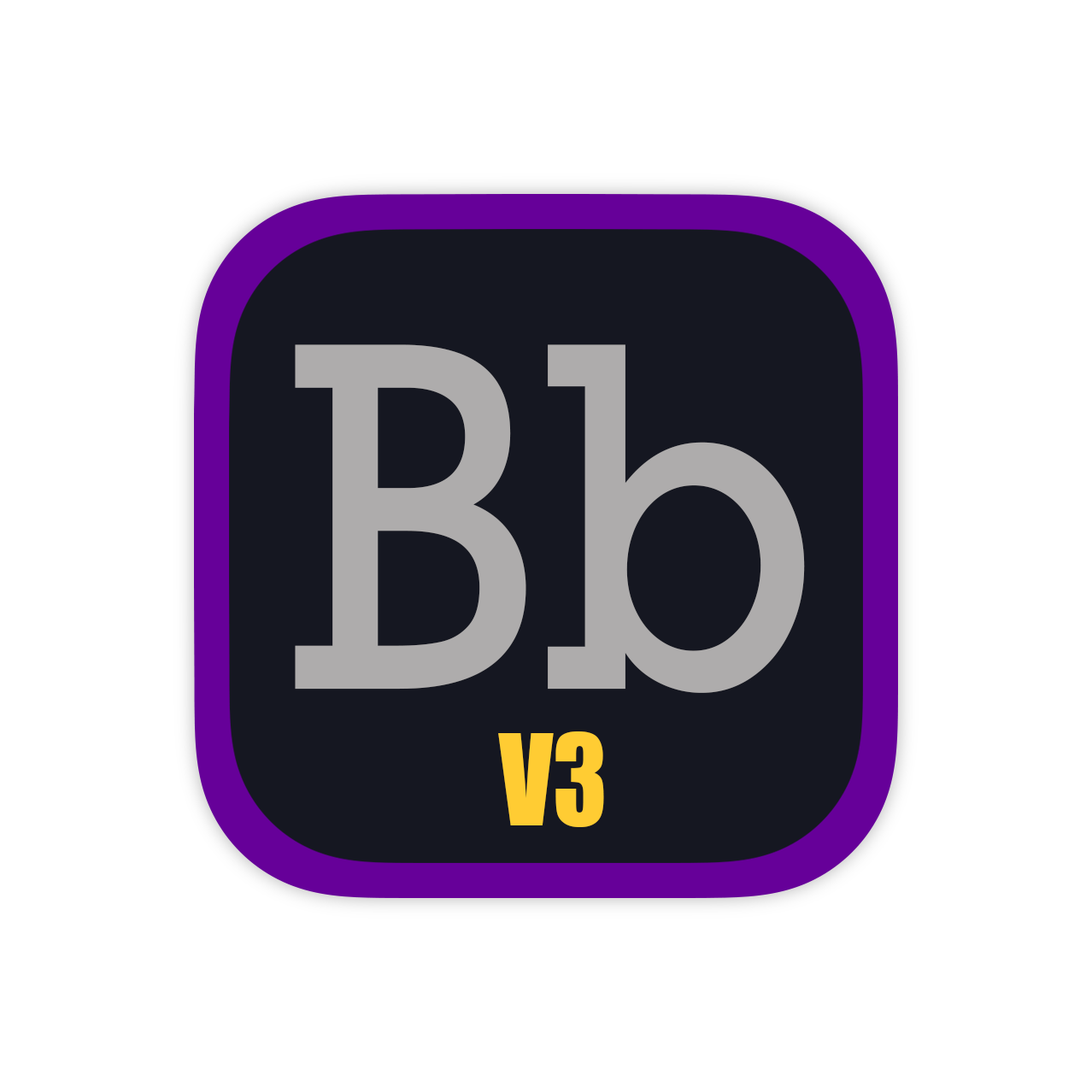
<style>
.page{position:relative;width:1092px;height:1092px;background:#ffffff}
.page>*{position:absolute;margin:0}
.t1{font:467.6px "Rockwell-Regular";color:#aeacac;scale:0.88 1}
.t2{font:116.9px "Impact";color:#ffcc33;scale:0.88 1}
</style>
<div class="page">
<p class="t1" style="left:295px;top:344px;width:510px;height:349px">Bb</p>
<p class="t2" style="left:498px;top:731px;width:106px;height:96px">V3</p>
</div>
